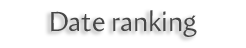
<style>
.page{position:relative;width:246px;height:48px;background:#ffffff}
.page>*{position:absolute;margin:0}
.t1{font:28px "Amira-Roman";color:#474747}
</style>
<div class="page">
<p class="t1" style="left:51px;top:10px;width:146px;height:27px">Date ranking</p>
</div>
